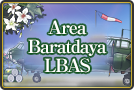
<style>
.page{position:relative;width:134px;height:90px}
.page>*{position:absolute;margin:0}
.t1{font:18px/19px "RyuminPro-ExBold";letter-spacing:-0.08em;color:#ffffff}
</style>
<div class="page">
<p class="t1" style="left:28px;top:20px;width:79px;height:53px;text-align:center">Area<br>Baratdaya<br>LBAS</p>
</div>
